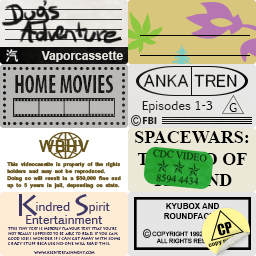
<style>
.page{position:relative;width:256px;height:256px}
.page>*{position:absolute;margin:0}
.t1{font:12px "Arial-BoldMT";color:#e9e5df}
.t2{font:25.7px "MyriadPro-BoldCond";color:#1b1a18;scale:0.81 1}
.t3{font:18px "MS-UIGothic";color:#000000}
.t4{font:12px "EuphemiaCAS";color:#181816}
.t5{font:12px "EuphemiaCAS";color:#000000}
.t6{font:10px "SegoeWP-Bold";color:#1e1d1b}
.t7{font:18px "TimesNewRomanPS-BoldMT"}
.t8{font:6px "Latha-Bold";color:#67531c}
.t9{font:6px "ArialMT";color:#000000}
.t10{font:8px "Arial-BoldMT";color:#000000}
.t11{font:14.5px "Impact";color:#000000}
.t12{font:4px "LithosPro-Regular";color:#3d3866}
</style>
<div class="page">
<p class="t1" style="left:41px;top:51px;width:82px;height:11px">Vaporcassette</p>
<p class="t2" style="left:15px;top:75px;width:98px;height:18px">HOME MOVIES</p>
<p class="t3" style="left:143px;top:74px;width:94px;height:14px">ANKA TREN</p>
<p class="t4" style="left:142px;top:101px;width:71px;height:12px">Episodes 1-3</p>
<p class="t5" style="left:229px;top:103px;width:8px;height:9px">G</p>
<p class="t6" style="left:142px;top:116px;width:15px;height:9px">FBI</p>
<p class="t7" style="left:135px;top:131px;width:114px;height:55px;text-align:center">SPACEWARS:<br>THE END OF<br>THE END</p>
<p class="t8" style="left:7px;top:162px;width:114px;height:27px">This videocasette is property of the rights holders and may not be reproduced. Doing so will result in a $50,000 fine and up to 5 years in jail, depending on state.</p>
<p class="t9" style="left:144px;top:203px;width:96px;height:41px;text-align:center"><span class="t10">KYUBOX AND<br>ROUNDFACE 2<br><br></span>C  COPYRIGHT 1992. SBS VIDEO. ALL RIGHTS RESERVED.</p>
<p class="t11" style="left:217px;top:221px;width:15px;height:15px;rotate:-15deg">CP</p>
<p class="t12" style="left:7px;top:227px;width:114px;height:27px">This tiny text is mererly flavour text that you’re not really supposed to be able to read. If you can, good job! I WONDER IF I CAN GET AWAY WITH SOME CRAZY STUFF BECAUSE NO-oNE WILL READ THIS.<br><br>www.KSentertainment.com</p>
</div>
